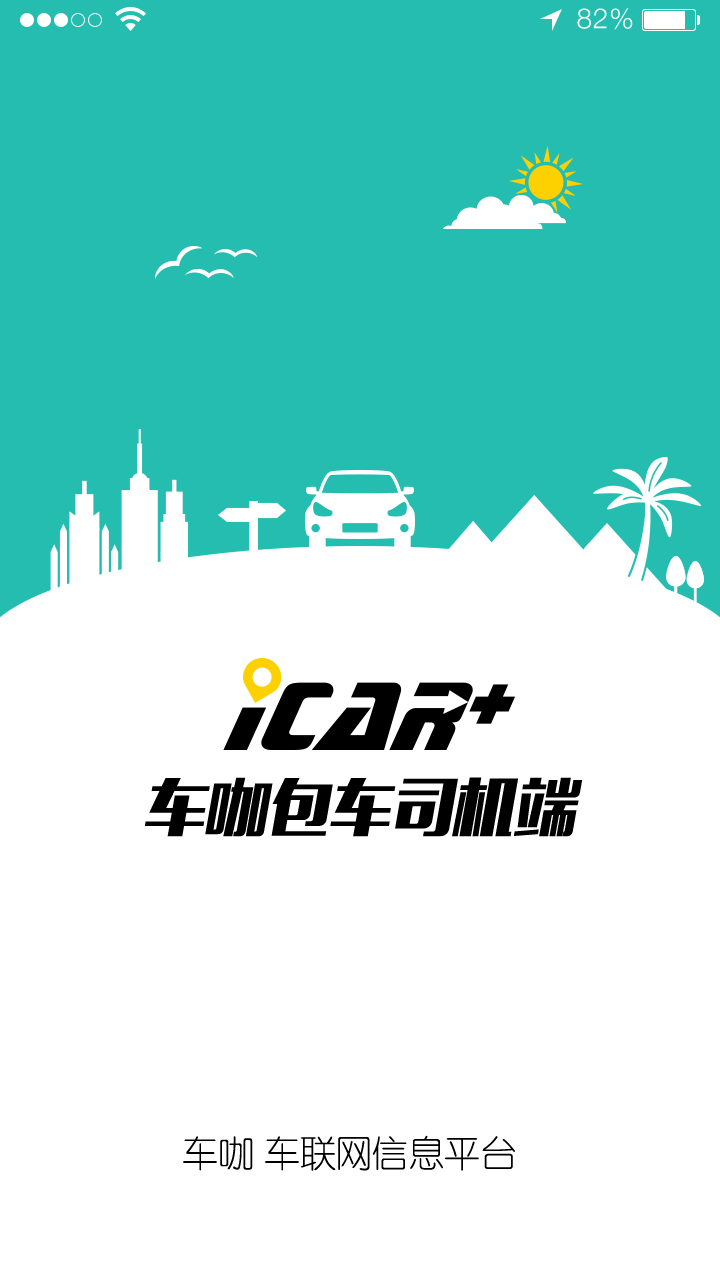
<style>
.page{position:relative;width:720px;height:1280px;background:#ffffff}
.page>*{position:absolute;margin:0}
.t1{font:28px "HelveticaNeue-Light";letter-spacing:0.025em;color:#ffffff}
.t2{font:61.8px "MFLiHei_Noncommercial-Regular";color:#000000;font-style:italic}
.t3{font:36px "JXiYuan";color:#000000}
</style>
<div class="page">
<p class="t1" style="left:577px;top:8px;width:56px;height:22px">82%</p>
<p class="t2" style="left:144px;top:777px;width:439px;height:60px">车咖包车司机端</p>
<p class="t3" style="left:182px;top:1135px;width:333px;height:36px">车咖 车联网信息平台</p>
</div>
